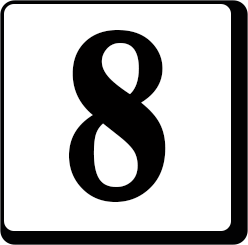
<style>
.page{position:relative;width:248px;height:245px;background:#ffffff}
.page>*{position:absolute;margin:0}
.t1{font:216px "BernardMT-Condensed";color:#010000}
</style>
<div class="page">
<p class="t1" style="left:69px;top:30px;width:97px;height:172px">8</p>
</div>
